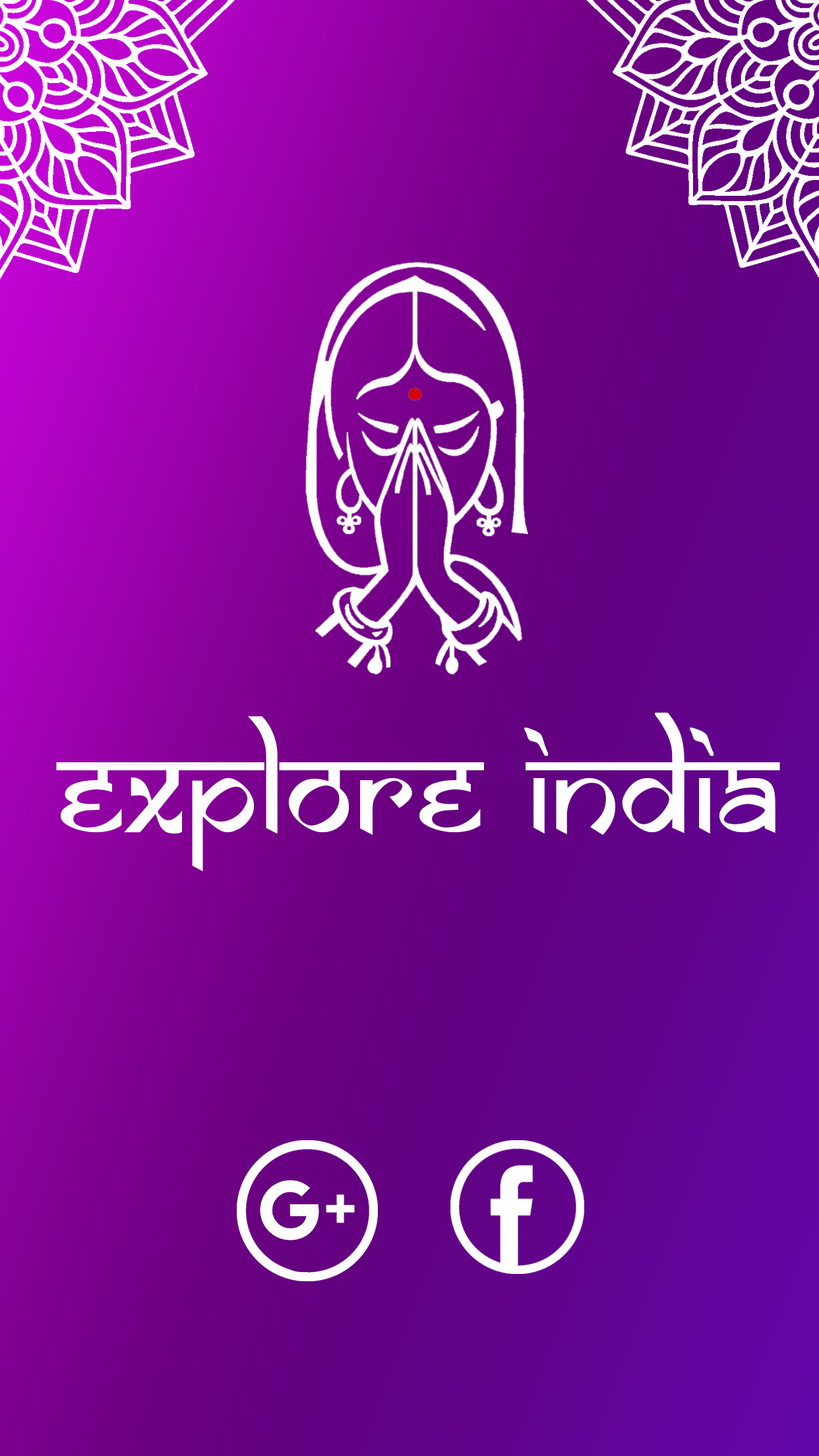
<style>
.page{position:relative;width:819px;height:1456px}
.page>*{position:absolute;margin:0}
.t1{font:131.9px "SamarkanNormal";color:#ffffff}
</style>
<div class="page">
<p class="t1" style="left:56px;top:712px;width:724px;height:159px">EXPLORE INDIA</p>
</div>
